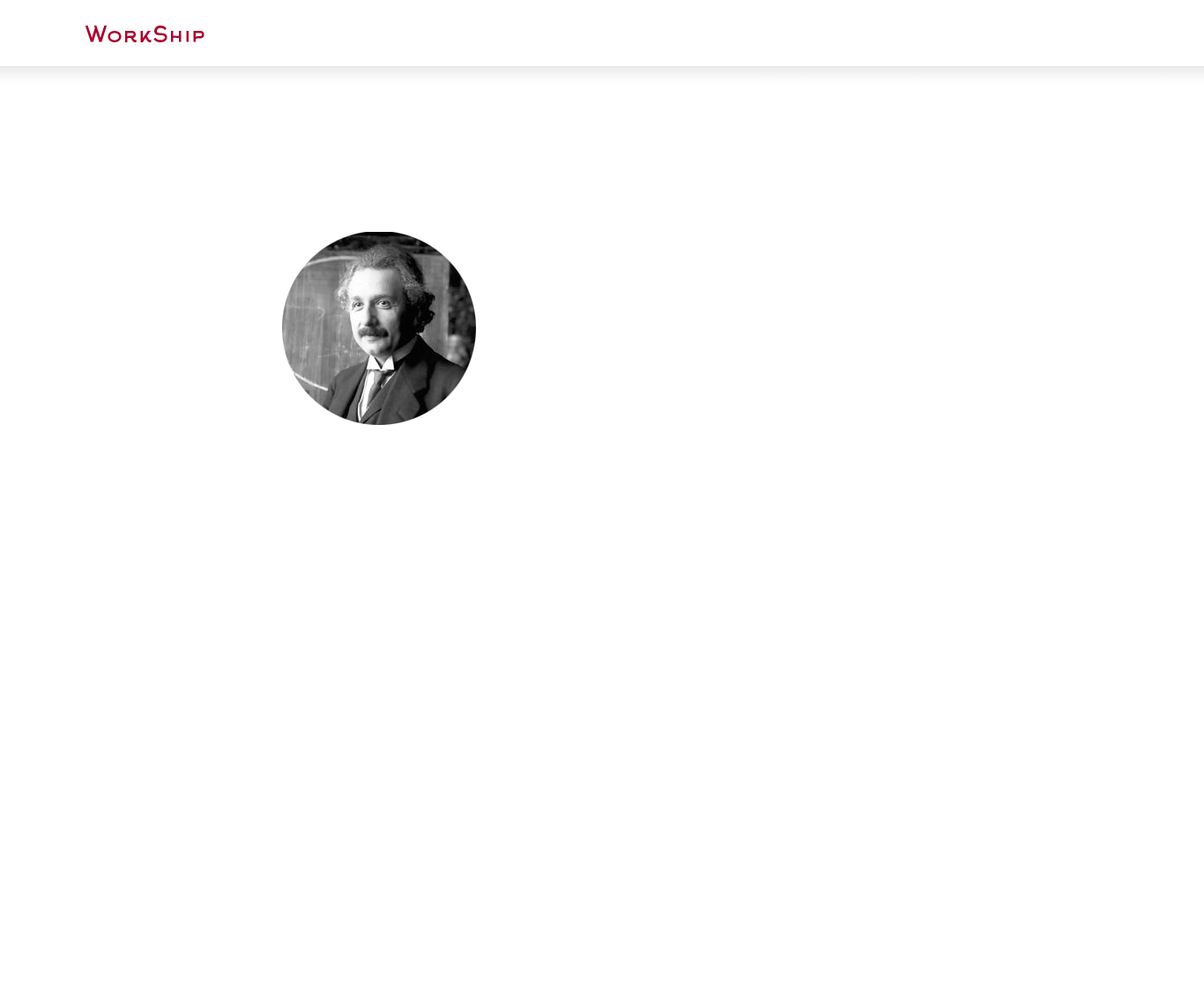
<style>
.page{position:relative;width:1204px;height:991px;background:#ffffff}
.page>*{position:absolute;margin:0}
.t1{font:21.2px "Arkhip";color:#ab002c}
</style>
<div class="page">
<p class="t1" style="left:85px;top:26px;width:119px;height:16px">WorkShip</p>
</div>
